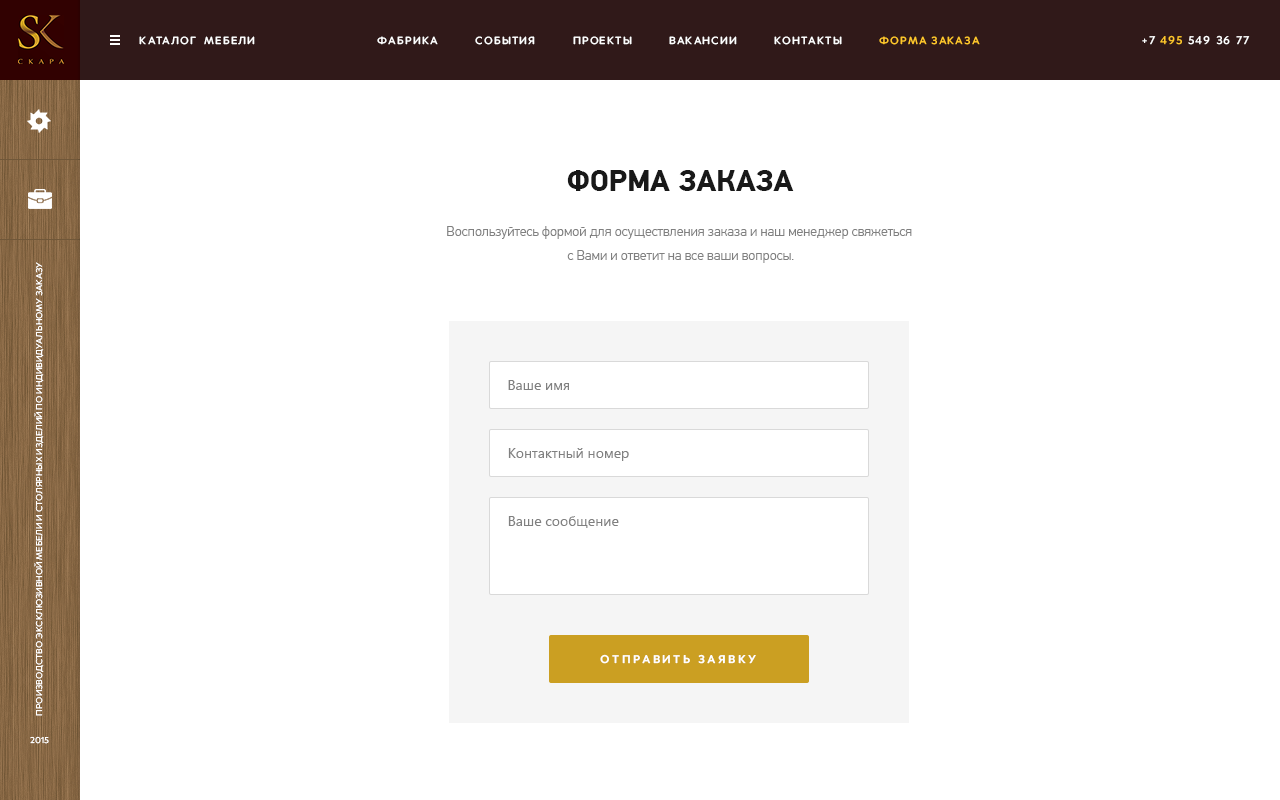
<style>
.page{position:relative;width:1280px;height:800px;background:#ffffff}
.page>*{position:absolute;margin:0}
.t1{font:11px "Merel-Medium";letter-spacing:0.1em;color:#ffffff;text-transform:uppercase}
.t2{font:11px "Merel-Medium";letter-spacing:0.1em;color:#ffc72b;text-transform:uppercase}
.t3{font:12px "Merel-Medium";letter-spacing:0.1em;color:#ffffff;text-transform:uppercase}
.t4{font:12px "Merel-Medium";letter-spacing:0.1em;color:#ffc72b;text-transform:uppercase}
.t5{font:30px "PFDinTextPro-Bold";color:#191919;text-transform:uppercase}
.t6{font:14px/24px "PFDinTextPro-Light";color:#808080}
.t7{font:9px "Merel-Regular";color:#ffffff;text-transform:uppercase}
.t8{font:14px "SegoeUI";color:#808080}
.t9{font:12px "Merel-Bold";letter-spacing:0.2em;color:#ffffff;text-transform:uppercase}
</style>
<div class="page">
<p class="t1" style="left:139px;top:36px;width:116px;height:9px">каталог  мебели</p>
<p class="t1" style="left:377px;top:36px;width:603px;height:9px">фабрика          события          проекты          вакансии          контакты<span class="t2">          форма заказа</span></p>
<p class="t3" style="left:1142px;top:35px;width:108px;height:10px">+7 <span class="t4">495</span> 549 36 77</p>
<p class="t5" style="left:567px;top:170px;width:227px;height:21px">Форма заказа</p>
<p class="t6" style="left:447px;top:226px;width:465px;height:37px;text-align:center">Воспользуйтесь формой для осуществления заказа и наш менеджер свяжеться <br>с Вами и ответит на все ваши вопросы.</p>
<p class="t7" style="left:34px;top:262px;width:10px;height:454px;rotate:-90deg">производство эксклюзивной мебели и столярных изделий по индивидуальному заказу</p>
<p class="t8" style="left:508px;top:380px;width:61px;height:10px">Ваше имя</p>
<p class="t8" style="left:508px;top:448px;width:121px;height:13px">Контактный номер</p>
<p class="t8" style="left:508px;top:516px;width:111px;height:12px">Ваше сообщение</p>
<p class="t9" style="left:600px;top:654px;width:156px;height:10px">Отправить заявку</p>
<p class="t7" style="left:30px;top:736px;width:19px;height:8px">2015</p>
</div>
